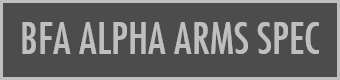
<style>
.page{position:relative;width:340px;height:80px;background:#4c4c4c}
.page>*{position:absolute;margin:0}
.t1{font:42.7px "FuturaCondensed";color:#bebfc1}
</style>
<div class="page">
<p class="t1" style="left:22px;top:22px;width:297px;height:32px">BFA ALPHA ARMS SPEC</p>
</div>
